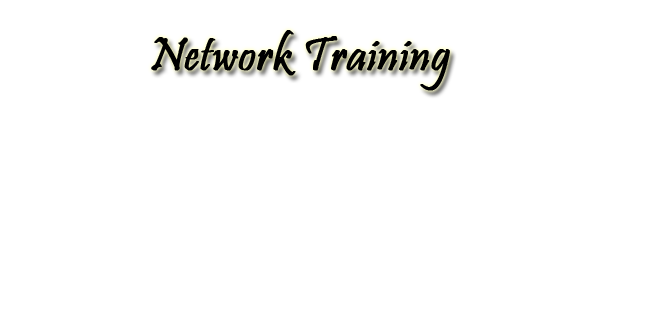
<style>
.page{position:relative;width:646px;height:317px;background:#ffffff}
.page>*{position:absolute;margin:0}
.t1{font:48px "Pristina-Regular";color:#000000;font-weight:bold}
</style>
<div class="page">
<p class="t1" style="left:151px;top:30px;width:299px;height:61px">Network Training</p>
</div>
